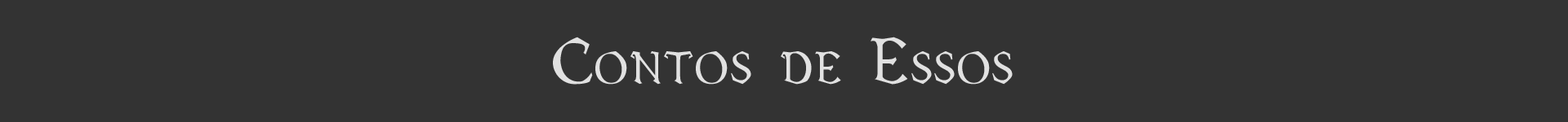
<style>
.page{position:relative;width:1568px;height:122px;background:#333333}
.page>*{position:absolute;margin:0}
.t1{font:68.7px "Vecna";color:#e1e1e1}
</style>
<div class="page">
<p class="t1" style="left:553px;top:37px;width:460px;height:48px">Contos de Essos</p>
</div>
